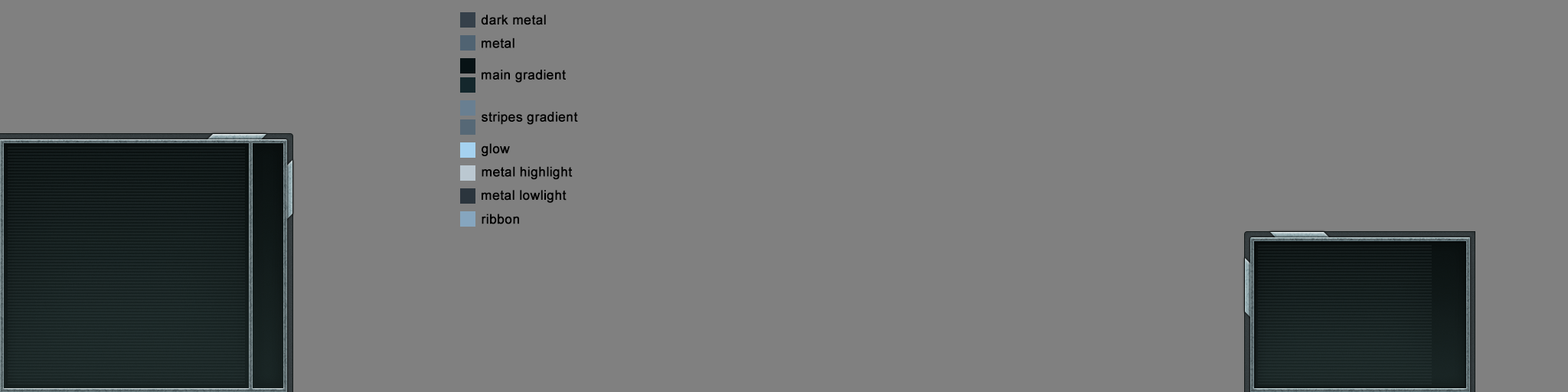
<style>
.page{position:relative;width:1568px;height:392px;background:#808080}
.page>*{position:absolute;margin:0}
.t1{font:13.3px "ArialMT";color:#000000;font-weight:bold}
</style>
<div class="page">
<p class="t1" style="left:481px;top:15px;width:65px;height:10px">dark metal</p>
<p class="t1" style="left:482px;top:38px;width:32px;height:10px">metal</p>
<p class="t1" style="left:482px;top:70px;width:84px;height:13px">main gradient</p>
<p class="t1" style="left:482px;top:112px;width:96px;height:13px">stripes gradient</p>
<p class="t1" style="left:482px;top:143px;width:28px;height:13px">glow</p>
<p class="t1" style="left:482px;top:166px;width:91px;height:14px">metal highlight</p>
<p class="t1" style="left:482px;top:190px;width:85px;height:13px">metal lowlight</p>
<p class="t1" style="left:482px;top:214px;width:37px;height:10px">ribbon</p>
</div>
